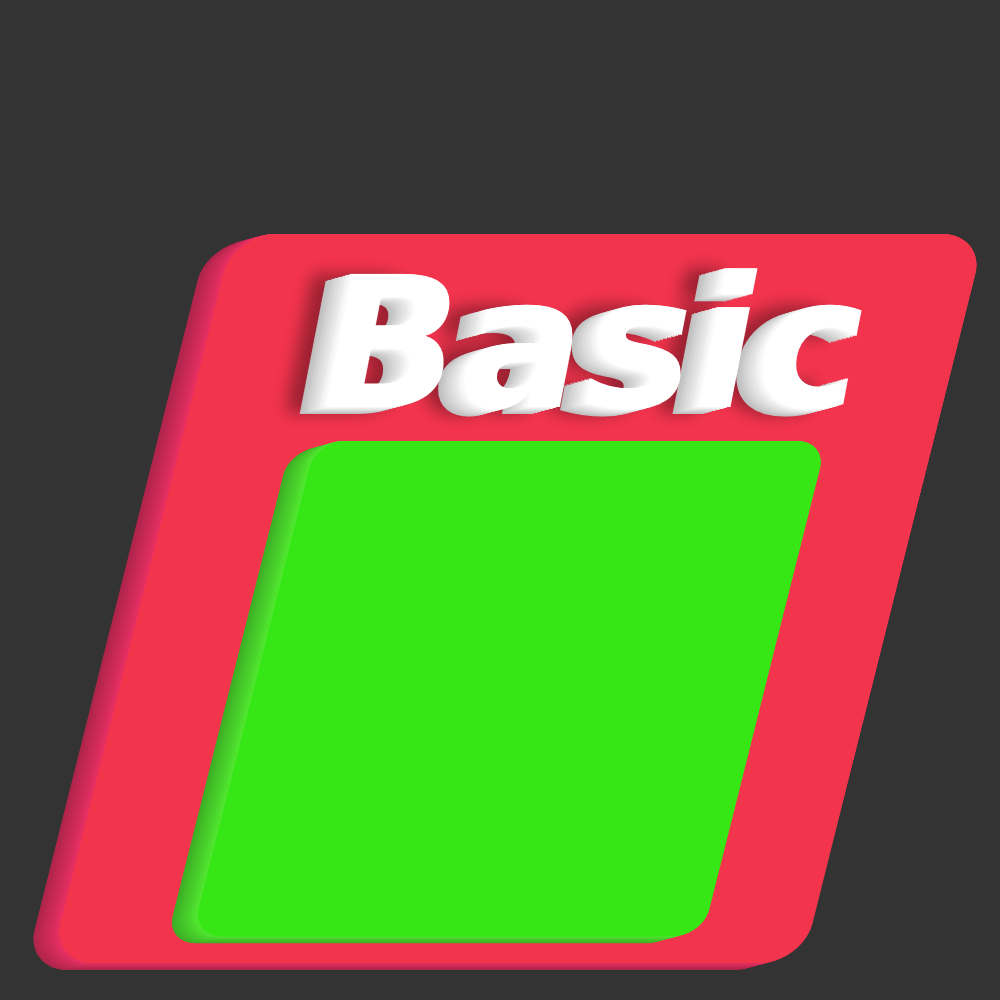
<style>
.page{position:relative;width:1000px;height:1000px;background:#333333}
.page>*{position:absolute;margin:0}
.t1{font:182.6px "DejaVuSans-BoldOblique";color:#ffffff}
</style>
<div class="page">
<p class="t1" style="left:325px;top:268px;width:537px;height:142px">Basic</p>
</div>
